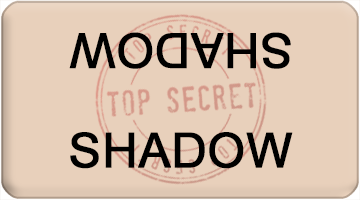
<style>
.page{position:relative;width:360px;height:200px;background:#e8d0bb}
.page>*{position:absolute;margin:0}
.t1{font:48px "ArialMT";color:#000000;font-weight:bold}
</style>
<div class="page">
<p class="t1" style="left:69px;top:32px;width:222px;height:37px;rotate:180deg">SHADOW</p>
<p class="t1" style="left:70px;top:132px;width:223px;height:37px">SHADOW</p>
</div>
